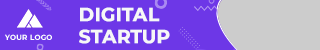
<style>
.page{position:relative;width:320px;height:50px;background:#6d37e7}
.page>*{position:absolute;margin:0}
.t1{font:18.6px "Montserrat-Bold";color:#f7f7f7;font-weight:bold}
.t2{font:7.5px "Montserrat-Bold";letter-spacing:0.025em;color:#ffffff;scale:0.96 1}
</style>
<div class="page">
<p class="t1" style="left:79px;top:7px;width:91px;height:37px">DIGITAL<br>STARTUP</p>
<p class="t2" style="left:5px;top:34px;width:47px;height:6px">YOUR LOGO</p>
</div>
